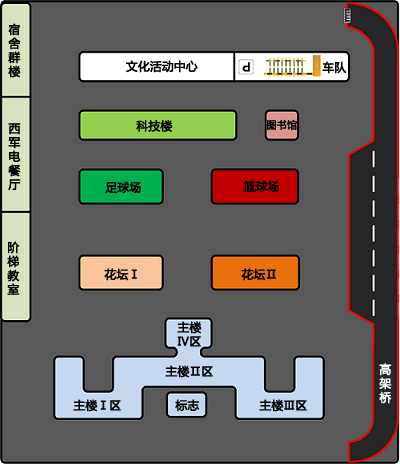
<style>
.page{position:relative;width:400px;height:464px;background:#595959}
.page>*{position:absolute;margin:0}
.t1{font:11.7px "MicrosoftYaHei";color:#000000;font-weight:bold}
.t2{font:10px "MicrosoftYaHei";color:#000000;font-weight:bold}
.t3{font:11.7px "MicrosoftYaHei";color:#ffffff;font-weight:bold}
</style>
<div class="page">
<p class="t1" style="left:8px;top:23px;width:13px;height:55px">宿<br>舍<br>群<br>楼</p>
<p class="t1" style="left:126px;top:60px;width:72px;height:13px">文化活动中心</p>
<p class="t1" style="left:322px;top:61px;width:25px;height:13px">车队</p>
<p class="t1" style="left:8px;top:123px;width:13px;height:68px">西<br>军<br>电<br>餐<br>厅</p>
<p class="t1" style="left:136px;top:120px;width:37px;height:12px">科技楼</p>
<p class="t2" style="left:267px;top:119px;width:30px;height:11px">图书馆</p>
<p class="t1" style="left:105px;top:181px;width:36px;height:13px">足球场</p>
<p class="t1" style="left:243px;top:180px;width:36px;height:13px">篮球场</p>
<p class="t1" style="left:7px;top:241px;width:13px;height:54px">阶<br>梯<br>教<br>室</p>
<p class="t1" style="left:104px;top:268px;width:33px;height:13px">花坛Ⅰ</p>
<p class="t1" style="left:241px;top:268px;width:35px;height:13px">花坛Ⅱ</p>
<p class="t1" style="left:177px;top:321px;width:25px;height:26px">主楼<br>Ⅳ区</p>
<p class="t1" style="left:165px;top:365px;width:48px;height:13px">主楼Ⅱ区</p>
<p class="t3" style="left:379px;top:363px;width:13px;height:41px">高<br>架<br>桥</p>
<p class="t1" style="left:73px;top:399px;width:48px;height:13px">主楼Ⅰ区</p>
<p class="t1" style="left:175px;top:399px;width:25px;height:13px">标志</p>
<p class="t1" style="left:259px;top:399px;width:48px;height:13px">主楼Ⅲ区</p>
</div>
